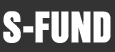
<style>
.page{position:relative;width:115px;height:52px;background:#333333}
.page>*{position:absolute;margin:0}
.t1{font:38px "UTM-HelvetIns";color:#ffffff;text-transform:uppercase;font-weight:bold;scale:0.9 1}
</style>
<div class="page">
<p class="t1" style="left:3px;top:11px;width:108px;height:32px">S-FUND</p>
</div>
